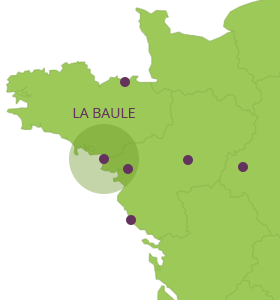
<style>
.page{position:relative;width:280px;height:300px;background:#9dc959}
.page>*{position:absolute;margin:0}
.t1{font:14px "OpenSans";color:#63325d;text-transform:uppercase}
</style>
<div class="page">
<p class="t1" style="left:73px;top:108px;width:62px;height:10px">La baule</p>
</div>
